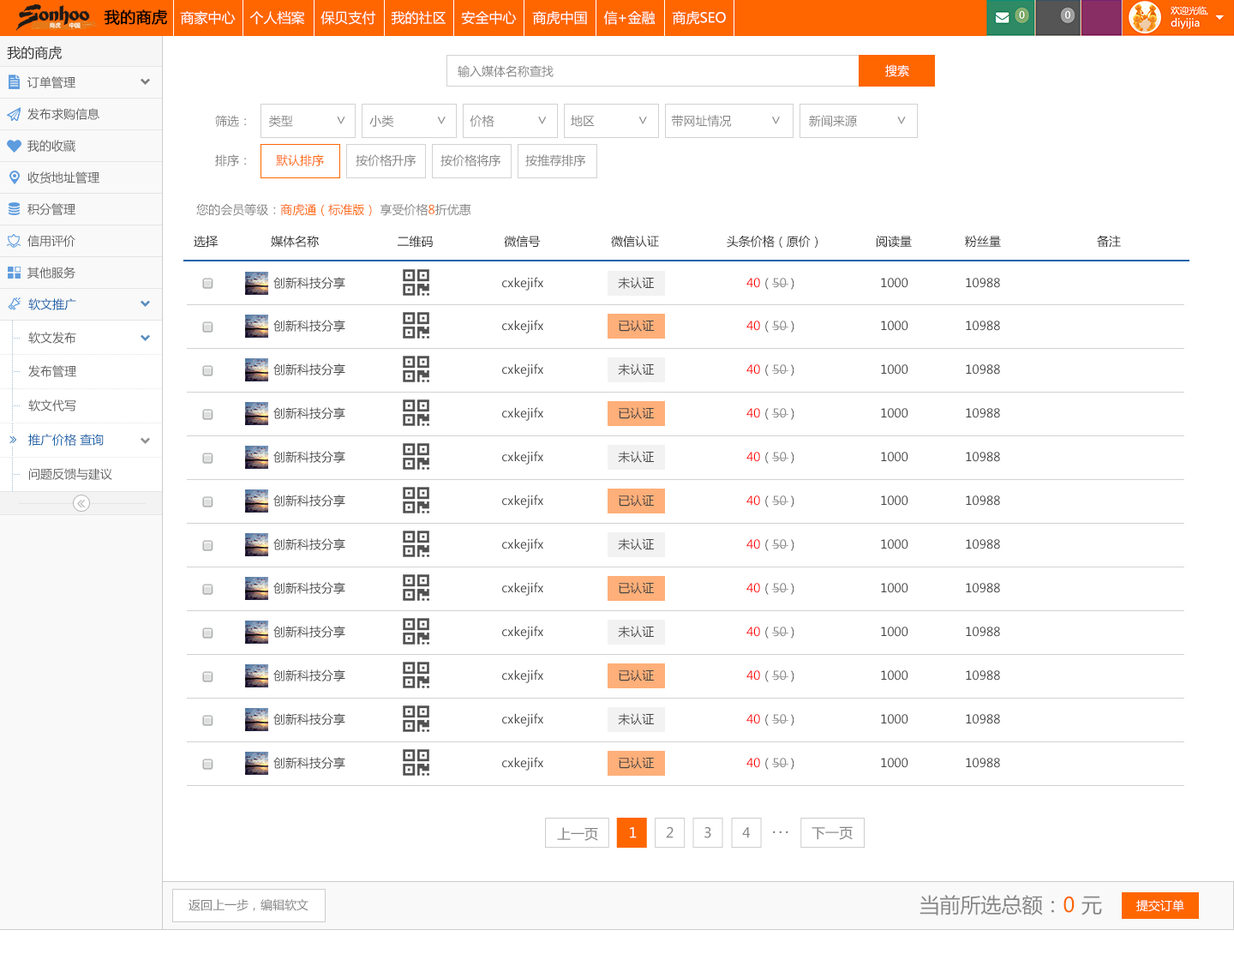
<style>
.page{position:relative;width:1234px;height:966px;background:#ffffff}
.page>*{position:absolute;margin:0}
.t1{font:15.4px "MicrosoftYaHei";color:#000000;font-weight:bold}
.t2{font:13.7px "MicrosoftYaHei";color:#ffffff}
.t3{font:13.7px "MicrosoftYaHei";color:#2d2d2d}
.t4{font:12px "MicrosoftYaHei";color:#858585}
.t5{font:12px "MicrosoftYaHei";color:#ffffff}
.t6{font:12px "MicrosoftYaHei";color:#616161}
.t7{font:15.4px "MicrosoftYaHei";color:#858585}
.t8{font:12px "MicrosoftYaHei";color:#ff6600}
.t9{font:12px "MicrosoftYaHei";color:#2d2d2d}
.t10{font:12px "MicrosoftYaHei";color:#444444}
.t11{font:12px "MicrosoftYaHei";color:#ff0000}
.t12{font:12px "MicrosoftYaHei";color:#1963aa}
.t13{font:3.4px "SimSun";color:#9dbdd6}
.t14{font:3.4px "SimSun";color:#e4e4e4}
.t15{font:13.7px "MicrosoftYaHei";color:#858585}
.t16{font:13.7px "MicrosoftYaHei";letter-spacing:0.2em;color:#858585;font-weight:bold}
.t17{font:20.6px "MicrosoftYaHei";color:#858585}
.t18{font:20.6px "MicrosoftYaHei";color:#ff6600}
</style>
<div class="page">
<p class="t1" style="left:104px;top:9px;width:63px;height:16px">我的商虎</p>
<p class="t2" style="left:180px;top:10px;width:56px;height:15px">商家中心</p>
<p class="t2" style="left:249px;top:11px;width:56px;height:14px">个人档案</p>
<p class="t2" style="left:321px;top:11px;width:54px;height:14px">保贝支付</p>
<p class="t2" style="left:391px;top:11px;width:55px;height:14px">我的社区</p>
<p class="t2" style="left:461px;top:10px;width:56px;height:15px">安全中心</p>
<p class="t2" style="left:532px;top:11px;width:55px;height:14px">商虎中国</p>
<p class="t2" style="left:603px;top:10px;width:53px;height:15px">信+金融</p>
<p class="t2" style="left:672px;top:11px;width:54px;height:14px">商虎SEO</p>
<p class="t3" style="left:7px;top:45px;width:55px;height:15px">我的商虎</p>
<p class="t4" style="left:458px;top:65px;width:96px;height:12px">输入媒体名称查找</p>
<p class="t5" style="left:885px;top:64px;width:24px;height:13px">搜索</p>
<p class="t6" style="left:27px;top:76px;width:48px;height:12px">订单管理</p>
<p class="t6" style="left:27px;top:108px;width:72px;height:12px">发布求购信息</p>
<p class="t4" style="left:215px;top:115px;width:691px;height:12px">筛选：     类型            <span class="t7">∨     </span>小类            <span class="t7">∨     </span>价格            <span class="t7">∨     </span>地区            <span class="t7">∨     </span>带网址情况           <span class="t7">∨      </span>新闻来源           <span class="t7">∨</span></p>
<p class="t6" style="left:27px;top:140px;width:48px;height:12px">我的收藏</p>
<p class="t4" style="left:215px;top:154px;width:370px;height:12px">排序：       <span class="t8">默认排序</span>         按价格升序       按价格将序       按推荐排序</p>
<p class="t6" style="left:27px;top:171px;width:72px;height:12px">收货地址管理</p>
<p class="t6" style="left:27px;top:203px;width:48px;height:12px">积分管理</p>
<p class="t8" style="left:196px;top:203px;width:275px;height:13px"><span class="t4">您的会员等级：</span>商虎通（标准版）<span class="t4"> 享受价格</span>8<span class="t4">折优惠</span></p>
<p class="t6" style="left:27px;top:235px;width:48px;height:12px">信用评价</p>
<p class="t9" style="left:194px;top:235px;width:927px;height:13px">选择               媒体名称                      二维码                    微信号                    微信认证                   头条价格（原价）               阅读量               粉丝量                           备注</p>
<p class="t6" style="left:27px;top:267px;width:48px;height:12px">其他服务</p>
<p class="t10" style="left:273px;top:277px;width:727px;height:14px">创新科技分享                                            cxkejifx                     未认证                          <span class="t11">40</span>（<span class="t4">50</span>）                       1000                10988</p>
<p class="t12" style="left:28px;top:298px;width:48px;height:12px">软文推广</p>
<p class="t13" style="left:12px;top:321px;width:1px;height:42px">.........................</p>
<p class="t10" style="left:273px;top:320px;width:727px;height:13px">创新科技分享                                            cxkejifx                     已认证                          <span class="t11">40</span>（<span class="t4">50</span>）                       1000                10988</p>
<p class="t13" style="left:14px;top:338px;width:6px;height:1px">....</p>
<p class="t6" style="left:28px;top:332px;width:48px;height:12px">软文发布</p>
<p class="t14" style="left:1px;top:354px;width:160px;height:1px">..............................................................................................</p>
<p class="t13" style="left:12px;top:355px;width:1px;height:42px">.........................</p>
<p class="t13" style="left:12px;top:355px;width:1px;height:42px">.........................</p>
<p class="t13" style="left:12px;top:355px;width:1px;height:42px">.........................</p>
<p class="t6" style="left:28px;top:365px;width:48px;height:12px">发布管理</p>
<p class="t10" style="left:273px;top:363px;width:727px;height:14px">创新科技分享                                            cxkejifx                     未认证                          <span class="t11">40</span>（<span class="t4">50</span>）                       1000                10988</p>
<p class="t13" style="left:14px;top:371px;width:6px;height:1px">....</p>
<p class="t14" style="left:1px;top:388px;width:160px;height:1px">..............................................................................................</p>
<p class="t13" style="left:12px;top:379px;width:1px;height:42px">.........................</p>
<p class="t13" style="left:12px;top:379px;width:1px;height:42px">.........................</p>
<p class="t6" style="left:28px;top:399px;width:48px;height:12px">软文代写</p>
<p class="t13" style="left:14px;top:405px;width:6px;height:1px">....</p>
<p class="t10" style="left:273px;top:407px;width:727px;height:14px">创新科技分享                                            cxkejifx                     已认证                          <span class="t11">40</span>（<span class="t4">50</span>）                       1000                10988</p>
<p class="t14" style="left:1px;top:423px;width:160px;height:0px">..............................................................................................</p>
<p class="t13" style="left:12px;top:423px;width:1px;height:10px">......</p>
<p class="t12" style="left:28px;top:434px;width:76px;height:12px">推广价格 查询</p>
<p class="t13" style="left:12px;top:447px;width:1px;height:9px">......</p>
<p class="t14" style="left:1px;top:457px;width:160px;height:1px">..............................................................................................</p>
<p class="t13" style="left:12px;top:458px;width:1px;height:33px">....................</p>
<p class="t10" style="left:273px;top:451px;width:727px;height:14px">创新科技分享                                            cxkejifx                     未认证                          <span class="t11">40</span>（<span class="t4">50</span>）                       1000                10988</p>
<p class="t6" style="left:29px;top:468px;width:83px;height:12px">问题反馈与建议</p>
<p class="t13" style="left:14px;top:474px;width:6px;height:1px">....</p>
<p class="t10" style="left:273px;top:495px;width:727px;height:13px">创新科技分享                                            cxkejifx                     已认证                          <span class="t11">40</span>（<span class="t4">50</span>）                       1000                10988</p>
<p class="t10" style="left:273px;top:538px;width:727px;height:14px">创新科技分享                                            cxkejifx                     未认证                          <span class="t11">40</span>（<span class="t4">50</span>）                       1000                10988</p>
<p class="t10" style="left:273px;top:582px;width:727px;height:14px">创新科技分享                                            cxkejifx                     已认证                          <span class="t11">40</span>（<span class="t4">50</span>）                       1000                10988</p>
<p class="t10" style="left:273px;top:626px;width:727px;height:13px">创新科技分享                                            cxkejifx                     未认证                          <span class="t11">40</span>（<span class="t4">50</span>）                       1000                10988</p>
<p class="t10" style="left:273px;top:669px;width:727px;height:14px">创新科技分享                                            cxkejifx                     已认证                          <span class="t11">40</span>（<span class="t4">50</span>）                       1000                10988</p>
<p class="t10" style="left:273px;top:713px;width:727px;height:14px">创新科技分享                                            cxkejifx                     未认证                          <span class="t11">40</span>（<span class="t4">50</span>）                       1000                10988</p>
<p class="t10" style="left:273px;top:757px;width:727px;height:14px">创新科技分享                                            cxkejifx                     已认证                          <span class="t11">40</span>（<span class="t4">50</span>）                       1000                10988</p>
<p class="t15" style="left:557px;top:827px;width:41px;height:14px">上一页</p>
<p class="t2" style="left:630px;top:827px;width:7px;height:11px">1</p>
<p class="t15" style="left:666px;top:827px;width:8px;height:11px">2</p>
<p class="t15" style="left:705px;top:827px;width:6px;height:11px">3</p>
<p class="t15" style="left:742px;top:827px;width:8px;height:11px">4</p>
<p class="t16" style="left:773px;top:831px;width:16px;height:2px">···</p>
<p class="t15" style="left:812px;top:826px;width:41px;height:14px">下一页</p>
<p class="t4" style="left:189px;top:899px;width:120px;height:12px">返回上一步，编辑软文</p>
<p class="t17" style="left:920px;top:895px;width:182px;height:20px">当前所选总额：<span class="t18">0 </span>元</p>
<p class="t5" style="left:1137px;top:899px;width:48px;height:13px">提交订单</p>
</div>
